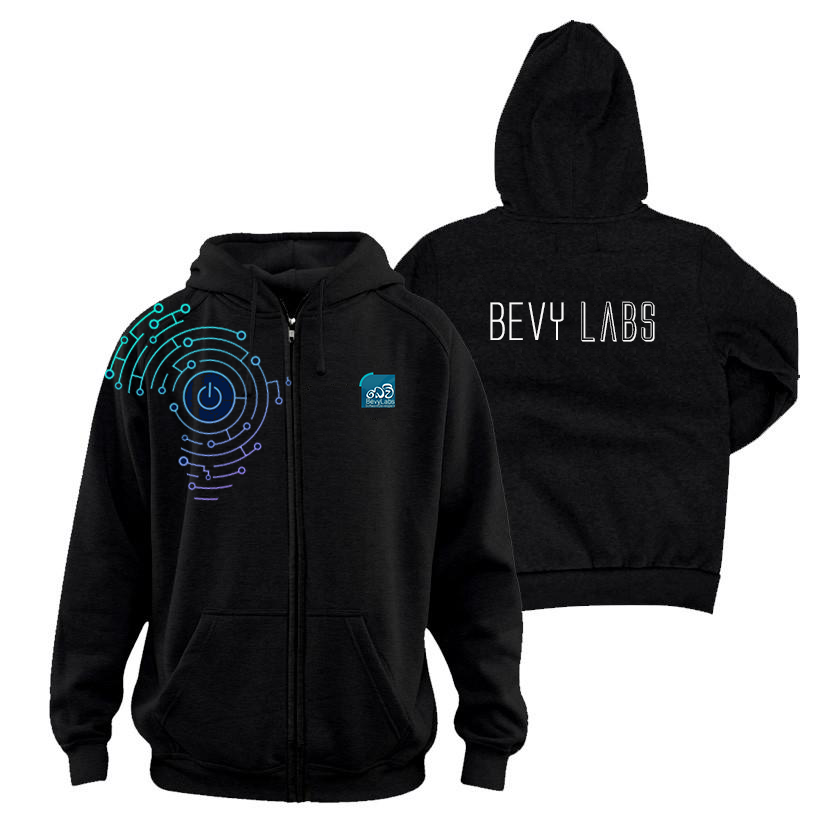
<style>
.page{position:relative;width:832px;height:832px;background:#ffffff}
.page>*{position:absolute;margin:0}
.t1{font:50px "AlienLeagueIIExpanded";color:#f9f8f8}
.t2{font:50px "AlienLeagueII3D";color:#f9f8f8}
</style>
<div class="page">
<p class="t1" style="left:490px;top:301px;width:165px;height:41px">Bevy <span class="t2">Labs</span></p>
</div>
